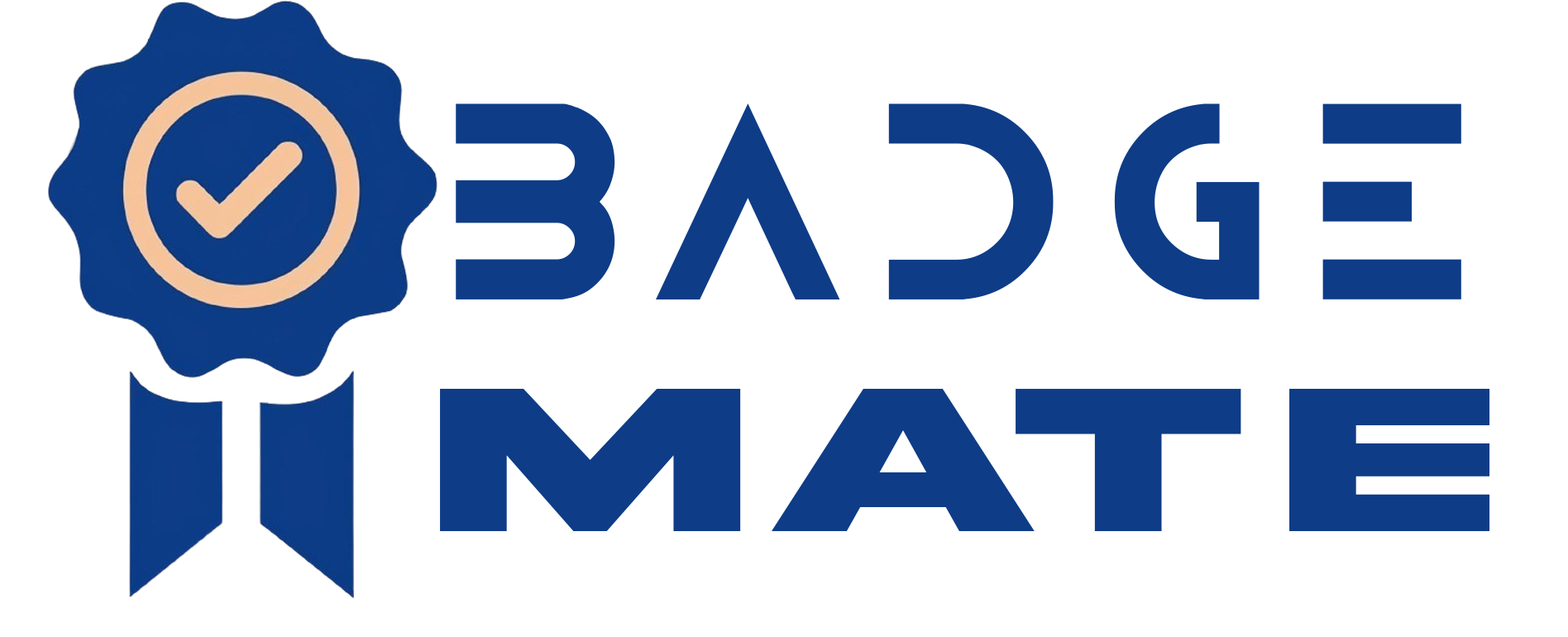
<style>
.page{position:relative;width:1568px;height:637px;background:#ffffff}
.page>*{position:absolute;margin:0}
.t1{font:217.1px "BIOWEAPON-Regular";letter-spacing:0.1em;color:#0e3c87}
.t2{font:217.1px "AkiraExpanded-SuperBold";letter-spacing:0.1em;color:#0e3c87;scale:1.2 1}
</style>
<div class="page">
<p class="t1" style="left:456px;top:103px;width:1005px;height:196px">Badge</p>
<p class="t2" style="left:440px;top:389px;width:1050px;height:142px">MATE</p>
</div>
